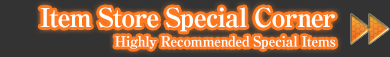
<style>
.page{position:relative;width:390px;height:57px;background:#333333}
.page>*{position:absolute;margin:0}
.t1{font:14px/30px "RyuminPro-ExBold";letter-spacing:-0.04em;color:#fffffa}
.t2{font:26px/30px "RyuminPro-ExBold";letter-spacing:-0.04em;color:#fffffa}
</style>
<div class="page">
<p class="t1" style="left:40px;top:7px;width:296px;height:42px;text-align:right"><span class="t2">Item Store Special Corner<br></span>Highly Recommended Special Items</p>
</div>
